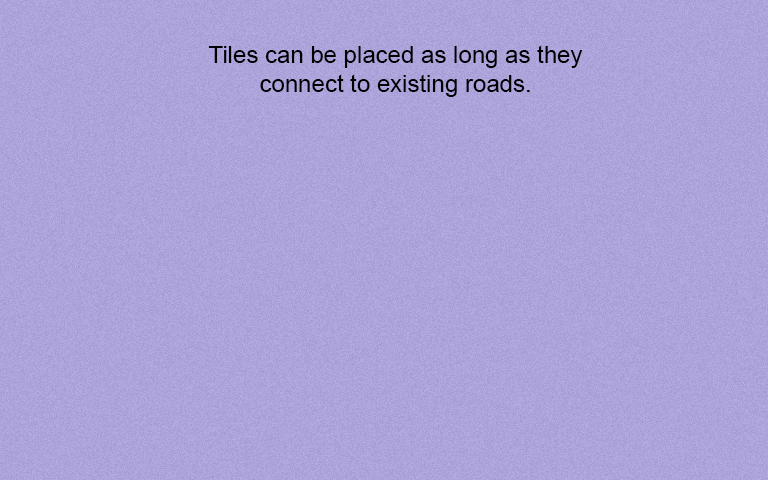
<style>
.page{position:relative;width:768px;height:480px}
.page>*{position:absolute;margin:0}
.t1{font:24px "ArialMT";color:#000000}
</style>
<div class="page">
<p class="t1" style="left:208px;top:45px;width:375px;height:52px;text-align:center">Tiles can be placed as long as they<br>connect to existing roads.</p>
</div>
